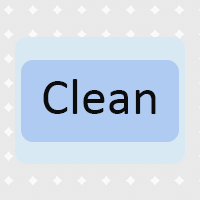
<style>
.page{position:relative;width:200px;height:200px;background:#afcbf1}
.page>*{position:absolute;margin:0}
.t1{font:52.3px "Calibri";color:#0c0c0c}
</style>
<div class="page">
<p class="t1" style="left:43px;top:79px;width:113px;height:35px">Clean</p>
</div>
